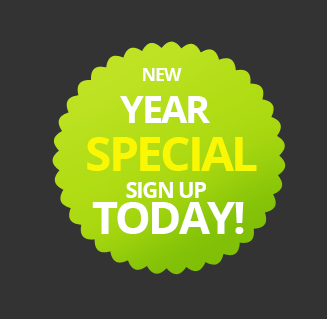
<style>
.page{position:relative;width:327px;height:319px;background:#333333}
.page>*{position:absolute;margin:0}
.t1{font:18px "OpenSans-Bold";letter-spacing:-0.06em;color:#ffffff;text-transform:uppercase}
.t2{font:38px "OpenSans-Bold";letter-spacing:-0.06em;color:#ffffff;text-transform:uppercase}
.t3{font:48px "OpenSans-Bold";letter-spacing:-0.06em;color:#faf704;text-transform:uppercase}
.t4{font:22px "OpenSans-Bold";letter-spacing:-0.06em;color:#ffffff;text-transform:uppercase}
.t5{font:45px "OpenSans-Bold";letter-spacing:-0.06em;color:#ffffff;text-transform:uppercase}
</style>
<div class="page">
<p class="t1" style="left:143px;top:68px;width:39px;height:13px">New</p>
<p class="t2" style="left:120px;top:96px;width:90px;height:27px">Year</p>
<p class="t3" style="left:87px;top:137px;width:170px;height:34px">Special</p>
<p class="t4" style="left:126px;top:182px;width:80px;height:16px">Sign UP</p>
<p class="t5" style="left:92px;top:202px;width:152px;height:32px">TODAY!</p>
</div>
